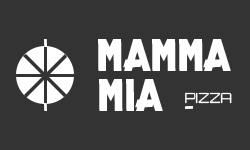
<style>
.page{position:relative;width:250px;height:150px;background:#333333}
.page>*{position:absolute;margin:0}
.t1{font:39.7px "HyperTopRegular";letter-spacing:-0.025em;color:#ffffff}
.t2{font:14px "Orbitron-Regular";letter-spacing:-0.025em;color:#ffffff}
</style>
<div class="page">
<p class="t1" style="left:98px;top:39px;width:133px;height:32px">MAMMA</p>
<p class="t1" style="left:99px;top:79px;width:64px;height:32px">MIA</p>
<p class="t2" style="left:185px;top:92px;width:47px;height:12px">PIZZA</p>
</div>
